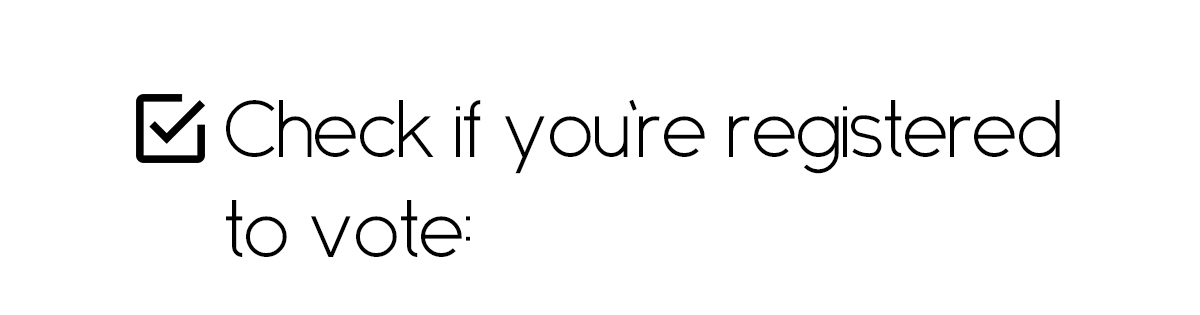
<style>
.page{position:relative;width:1200px;height:315px;background:#ffffff}
.page>*{position:absolute;margin:0}
.t1{font:83.3px "Sanseriffic";color:#010101}
</style>
<div class="page">
<p class="t1" style="left:226px;top:99px;width:834px;height:158px">Check if you’re registered<br>to vote:</p>
</div>
